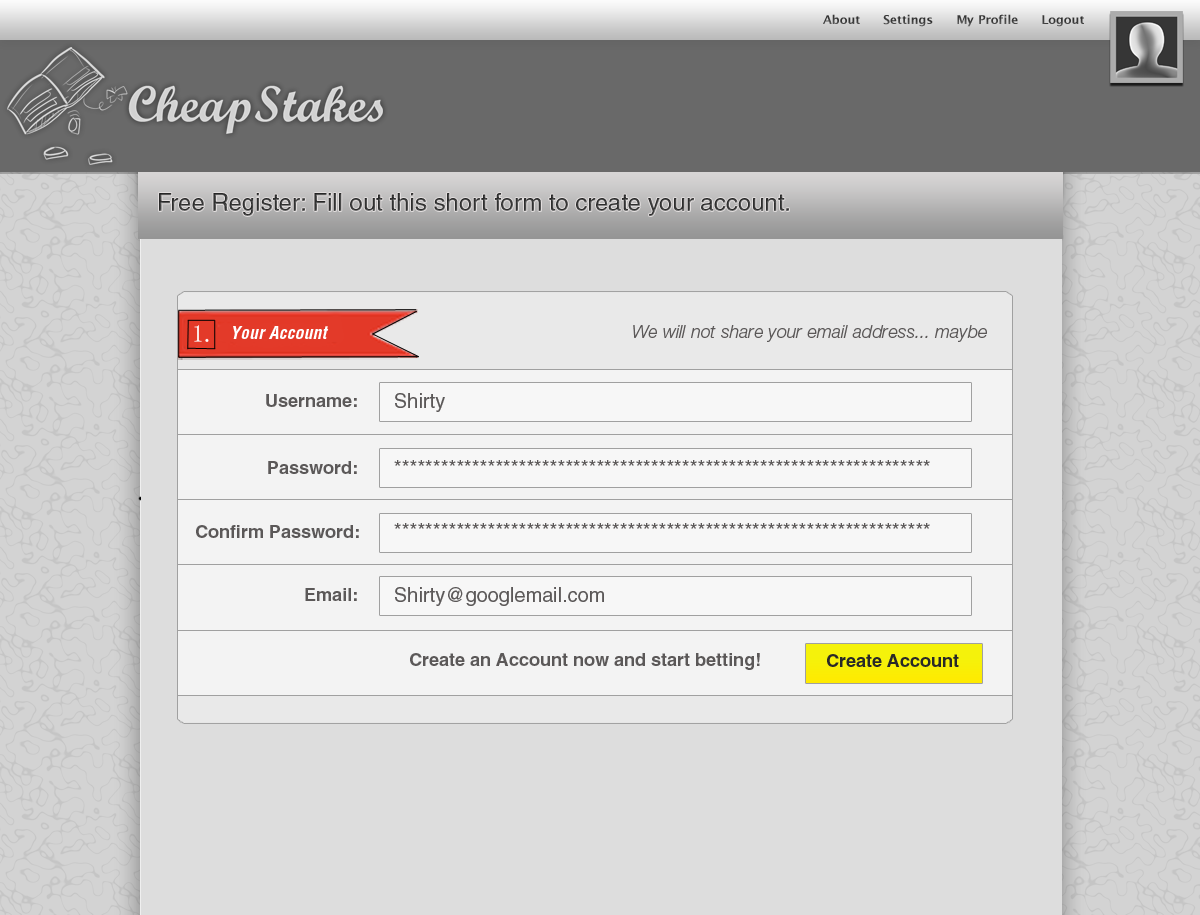
<style>
.page{position:relative;width:1200px;height:915px;background:#dddddd}
.page>*{position:absolute;margin:0}
.t1{font:24px "HelveticaLTStd-Roman";color:#373737}
.t2{font:24px "SimSun-ExtB";color:#ffffff}
.t3{font:18px "HelveticaLTStd-BoldCondObl";color:#ffffff}
.t4{font:18px "HelveticaNeueLTPro-LtIt";color:#5b5858}
.t5{font:18px "HelveticaLTStd-Bold";color:#5b5858}
.t6{font:20px "HelveticaLTStd-Roman";color:#5b5858}
.t7{font:18px "HelveticaLTStd-Bold";color:#282828}
</style>
<div class="page">
<p class="t1" style="left:159px;top:193px;width:630px;height:23px">Free Register: Fill out this short form to create your account.</p>
<p class="t2" style="left:194px;top:325px;width:15px;height:17px">1.</p>
<p class="t3" style="left:233px;top:326px;width:96px;height:13px">Your Account</p>
<p class="t4" style="left:633px;top:325px;width:354px;height:17px">We will not share your email address... maybe</p>
<p class="t5" style="left:266px;top:394px;width:91px;height:13px">Username:</p>
<p class="t6" style="left:395px;top:393px;width:50px;height:19px">Shirty</p>
<p class="t5" style="left:268px;top:461px;width:89px;height:13px">Password:</p>
<p class="t6" style="left:394px;top:460px;width:536px;height:6px">*********************************************************************</p>
<p class="t5" style="left:196px;top:525px;width:163px;height:13px">Confirm Password:</p>
<p class="t6" style="left:394px;top:523px;width:536px;height:6px">*********************************************************************</p>
<p class="t5" style="left:305px;top:588px;width:52px;height:13px">Email:</p>
<p class="t6" style="left:395px;top:587px;width:209px;height:19px">Shirty@googlemail.com</p>
<p class="t5" style="left:410px;top:653px;width:350px;height:17px">Create an Account now and start betting!</p>
<p class="t7" style="left:827px;top:654px;width:132px;height:13px">Create Account</p>
</div>
